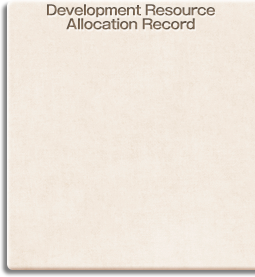
<style>
.page{position:relative;width:255px;height:277px}
.page>*{position:absolute;margin:0}
.t1{font:14px/14px "GothicMB101Pro-DeBold";letter-spacing:-0.04em;color:#766452}
</style>
<div class="page">
<p class="t1" style="left:47px;top:4px;width:169px;height:26px;text-align:center">Development Resource<br>Allocation Record</p>
</div>
